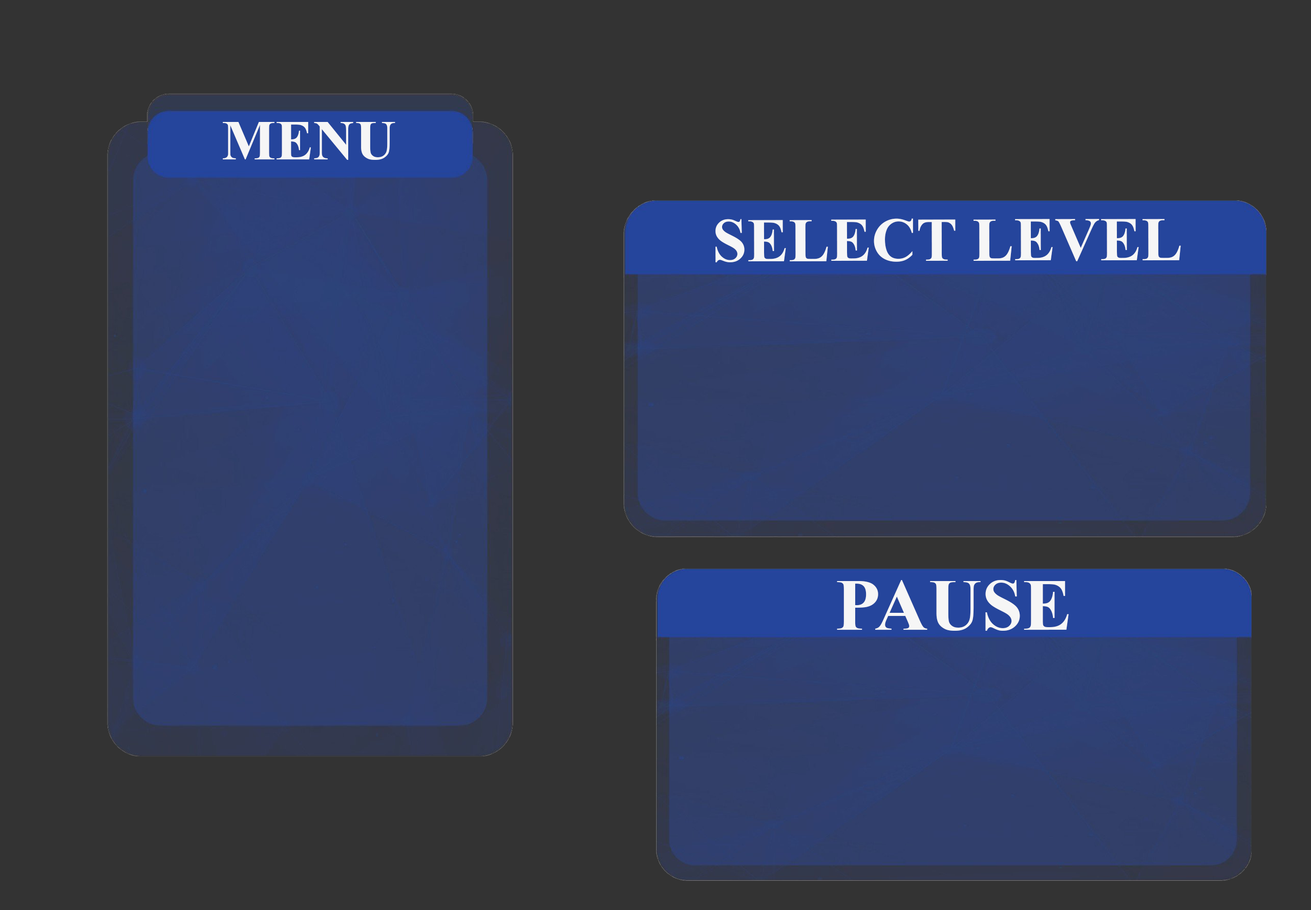
<style>
.page{position:relative;width:1311px;height:910px;background:#333333}
.page>*{position:absolute;margin:0}
.t1{font:57.1px "TimesNewRomanPS-BoldMT";color:#f6f6f6}
.t2{font:62.2px "TimesNewRomanPS-BoldMT";color:#f6f6f6}
.t3{font:73.8px "TimesNewRomanPS-BoldMT";color:#f6f6f6}
</style>
<div class="page">
<p class="t1" style="left:223px;top:122px;width:172px;height:38px">MENU</p>
<p class="t2" style="left:715px;top:218px;width:466px;height:44px">SELECT LEVEL</p>
<p class="t3" style="left:837px;top:580px;width:232px;height:50px">PAUSE</p>
</div>
